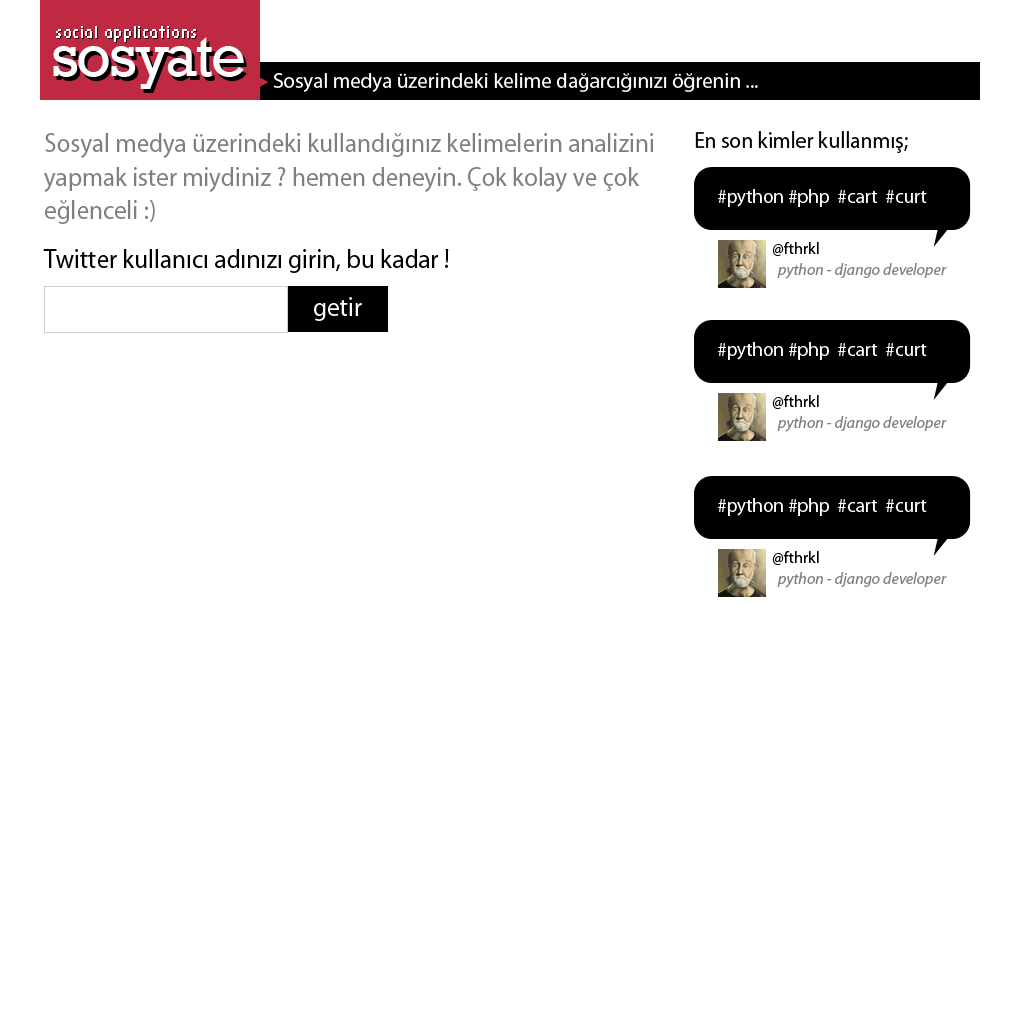
<style>
.page{position:relative;width:1020px;height:1020px;background:#ffffff}
.page>*{position:absolute;margin:0}
.t1{font:14px "SempliceRegular";letter-spacing:0.04em;color:#ffffff}
.t2{font:61px "Rockwell";letter-spacing:-0.04em;color:#ffffff}
.t3{font:27px/33.5px "MyriadPro-Regular";color:#7f7f7f;scale:0.93 1}
.t4{font:23px "MyriadPro-Regular";color:#000000;scale:0.93 1}
.t5{font:19px "MyriadPro-Regular";color:#ffffff}
.t6{font:16px "MyriadPro-Regular";color:#000000}
.t7{font:27px "MyriadPro-Regular";color:#000000;scale:0.93 1}
.t8{font:16px "MyriadPro-It";color:#7f7f7f}
.t9{font:27px "MyriadPro-Regular";color:#ffffff;scale:0.93 1}
</style>
<div class="page">
<p class="t1" style="left:56px;top:26px;width:140px;height:16px">social applications</p>
<p class="t2" style="left:53px;top:37px;width:191px;height:52px">sosyate</p>
<p class="t3" style="left:44px;top:133px;width:609px;height:91px">Sosyal medya üzerindeki kullandığınız kelimelerin analizini yapmak ister miydiniz ? hemen deneyin. Çok kolay ve çok eğlenceli :)</p>
<p class="t4" style="left:695px;top:131px;width:213px;height:22px">En son kimler kullanmış;</p>
<p class="t5" style="left:718px;top:189px;width:209px;height:18px">#python #php  #cart  #curt</p>
<p class="t6" style="left:772px;top:242px;width:47px;height:14px">@fthrkl</p>
<p class="t7" style="left:43px;top:249px;width:406px;height:24px">Twitter kullanıcı adınızı girin, bu kadar !</p>
<p class="t8" style="left:777px;top:263px;width:170px;height:16px">python - django developer</p>
<p class="t9" style="left:314px;top:297px;width:48px;height:24px">getir</p>
<p class="t5" style="left:718px;top:342px;width:209px;height:18px">#python #php  #cart  #curt</p>
<p class="t6" style="left:772px;top:395px;width:47px;height:14px">@fthrkl</p>
<p class="t8" style="left:777px;top:416px;width:170px;height:16px">python - django developer</p>
<p class="t5" style="left:718px;top:498px;width:209px;height:18px">#python #php  #cart  #curt</p>
<p class="t6" style="left:772px;top:551px;width:47px;height:14px">@fthrkl</p>
<p class="t8" style="left:777px;top:572px;width:170px;height:16px">python - django developer</p>
</div>
